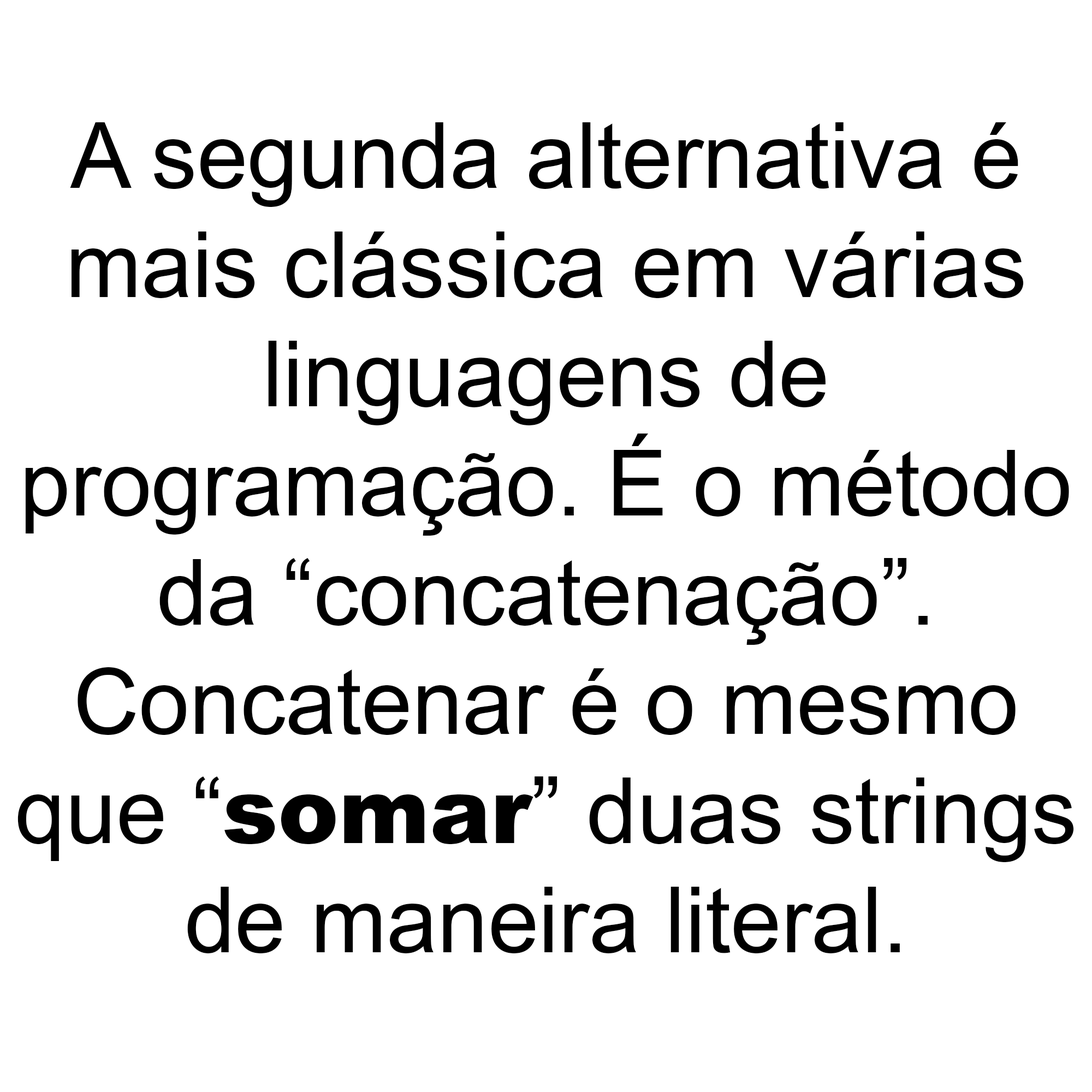
<style>
.page{position:relative;width:1092px;height:1092px;background:#ffffff}
.page>*{position:absolute;margin:0}
.t1{font:91px "ArialMT";color:#000000}
.t2{font:91px "Arial-Black";color:#000000}
</style>
<div class="page">
<p class="t1" style="left:17px;top:122px;width:1057px;height:831px;text-align:center">A segunda alternativa é<br>mais clássica em várias<br>linguagens de<br>programação. É o método<br>da “concatenação”.<br>Concatenar é o mesmo<br>que “<span class="t2">somar</span>” duas strings<br>de maneira literal.</p>
</div>
